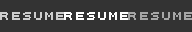
<style>
.page{position:relative;width:192px;height:32px;background:#333333}
.page>*{position:absolute;margin:0}
.t1{font:12.7px "Uni0554";color:#cdcdcd}
.t2{font:12.7px "Uni0554";color:#ffffff}
.t3{font:12.7px "Uni0554";color:#a5a5a5}
</style>
<div class="page">
<p class="t1" style="left:0px;top:12px;width:64px;height:8px">RESUME</p>
<p class="t2" style="left:64px;top:12px;width:64px;height:8px">RESUME</p>
<p class="t3" style="left:128px;top:12px;width:64px;height:8px">RESUME</p>
</div>
